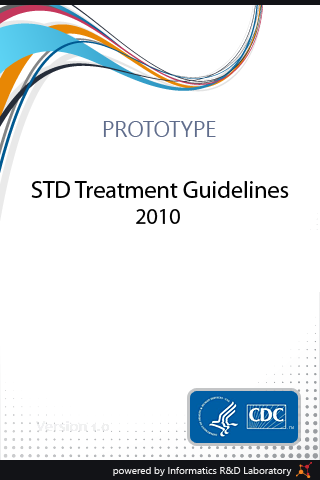
<style>
.page{position:relative;width:320px;height:480px;background:#ffffff}
.page>*{position:absolute;margin:0}
.t1{font:22px "Gisha";color:#606d8c}
.t2{font:24px "MyriadPro-Regular";color:#010101}
.t3{font:22px "MyriadPro-Regular";color:#010101}
.t4{font:4px "MyriadPro-Regular";color:#68a1c5}
.t5{font:10px "Gisha";color:#ecebeb}
</style>
<div class="page">
<p class="t1" style="left:103px;top:121px;width:113px;height:16px">PROTOTYPE</p>
<p class="t2" style="left:31px;top:181px;width:258px;height:43px;text-align:center">STD Treatment Guidelines<br><span class="t3">2010</span></p>
<p class="t4" style="left:289px;top:426px;width:5px;height:3px">TM</p>
<p class="t5" style="left:113px;top:467px;width:179px;height:9px">powered by Informatics R&amp;D Laboratory</p>
</div>
